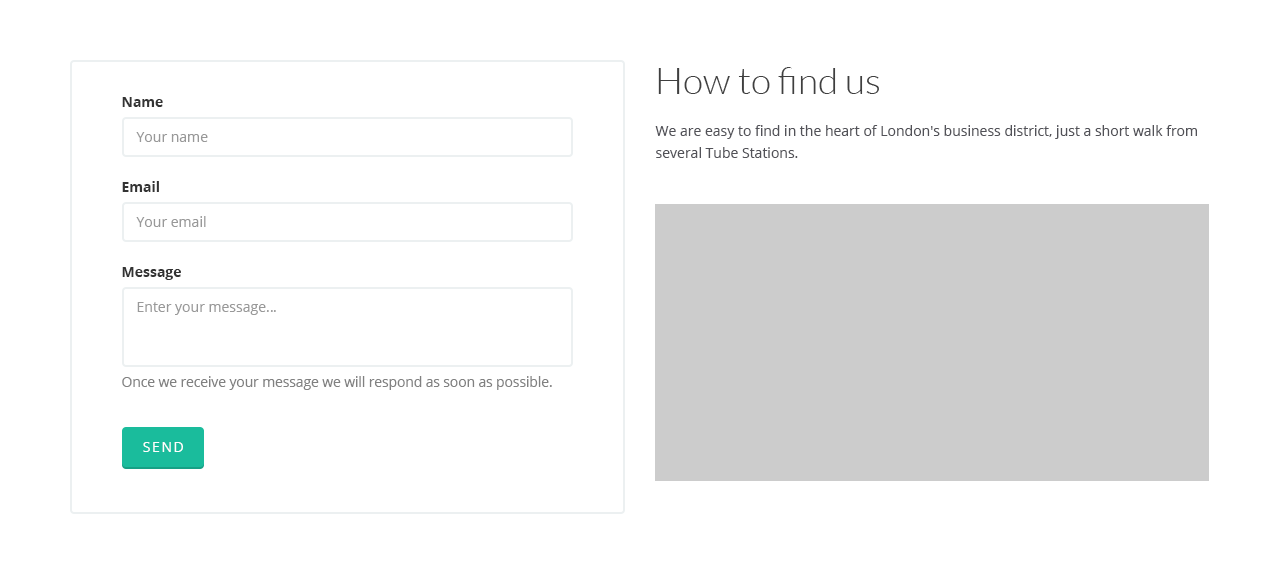
<style>
.page{position:relative;width:1280px;height:574px;background:#ffffff}
.page>*{position:absolute;margin:0}
.t1{font:37px "Lato-Light";color:#3f3f3f}
.t2{font:14px "OpenSans-Bold";color:#333333}
.t3{font:14px/22px "OpenSans";color:#525258}
.t4{font:14px "OpenSans";color:#999999}
.t5{font:14px "OpenSans";letter-spacing:-0.01em;color:#818181}
.t6{font:14px "OpenSans";letter-spacing:0.11em;color:#ffffff}
</style>
<div class="page">
<p class="t1" style="left:658px;top:67px;width:221px;height:27px">How to find us</p>
<p class="t2" style="left:122px;top:97px;width:41px;height:10px">Name</p>
<p class="t3" style="left:655px;top:125px;width:542px;height:33px">We are easy to find in the heart of London's business district, just a short walk from<br>several Tube Stations.</p>
<p class="t4" style="left:136px;top:132px;width:72px;height:10px">Your name</p>
<p class="t2" style="left:122px;top:181px;width:37px;height:11px">Email</p>
<p class="t4" style="left:136px;top:216px;width:70px;height:11px">Your email</p>
<p class="t2" style="left:122px;top:267px;width:59px;height:13px">Message</p>
<p class="t4" style="left:137px;top:302px;width:139px;height:13px">Enter your message…</p>
<p class="t5" style="left:122px;top:376px;width:430px;height:14px">Once we receive your message we will respond as soon as possible.</p>
<p class="t6" style="left:143px;top:442px;width:40px;height:10px">SEND</p>
</div>
